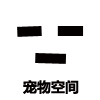
<style>
.page{position:relative;width:100px;height:100px;background:#ffffff}
.page>*{position:absolute;margin:0}
.t1{font:14px "MicrosoftYaHei-Bold";color:#050000}
</style>
<div class="page">
<p class="t1" style="left:23px;top:80px;width:56px;height:14px">宠物空间</p>
</div>
